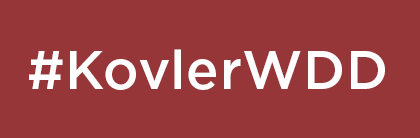
<style>
.page{position:relative;width:420px;height:138px;background:#973638}
.page>*{position:absolute;margin:0}
.t1{font:54px "Gotham-Medium";letter-spacing:0.01em;color:#ffffff}
</style>
<div class="page">
<p class="t1" style="left:29px;top:49px;width:356px;height:41px">#KovlerWDD</p>
</div>
